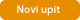
<style>
.page{position:relative;width:80px;height:20px;background:#e68d00}
.page>*{position:absolute;margin:0}
.t1{font:11px "MyriadPro-Semibold";color:#ffffff}
</style>
<div class="page">
<p class="t1" style="left:17px;top:5px;width:43px;height:11px">Novi upit</p>
</div>
